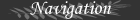
<style>
.page{position:relative;width:140px;height:20px;background:#333333}
.page>*{position:absolute;margin:0}
.t1{font:20px "MonotypeCorsiva";color:#ffffff}
</style>
<div class="page">
<p class="t1" style="left:30px;top:1px;width:82px;height:18px">Navigation</p>
</div>
